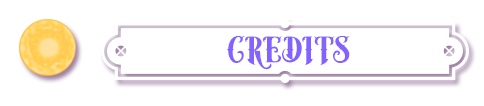
<style>
.page{position:relative;width:484px;height:106px;background:#ffffff}
.page>*{position:absolute;margin:0}
.t1{font:41.7px "Moyers";color:#8362ff}
</style>
<div class="page">
<p class="t1" style="left:227px;top:36px;width:123px;height:34px">CREDITS</p>
</div>
